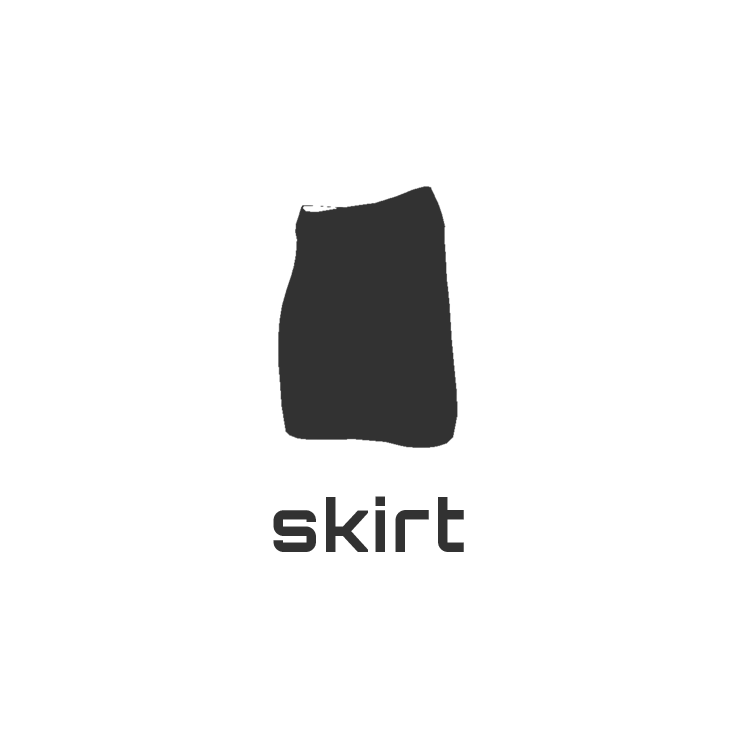
<style>
.page{position:relative;width:736px;height:736px;background:#ffffff}
.page>*{position:absolute;margin:0}
.t1{font:72px "Orbitron-Bold";letter-spacing:0.05em;color:#474747}
</style>
<div class="page">
<p class="t1" style="left:273px;top:496px;width:191px;height:56px">skirt</p>
</div>
